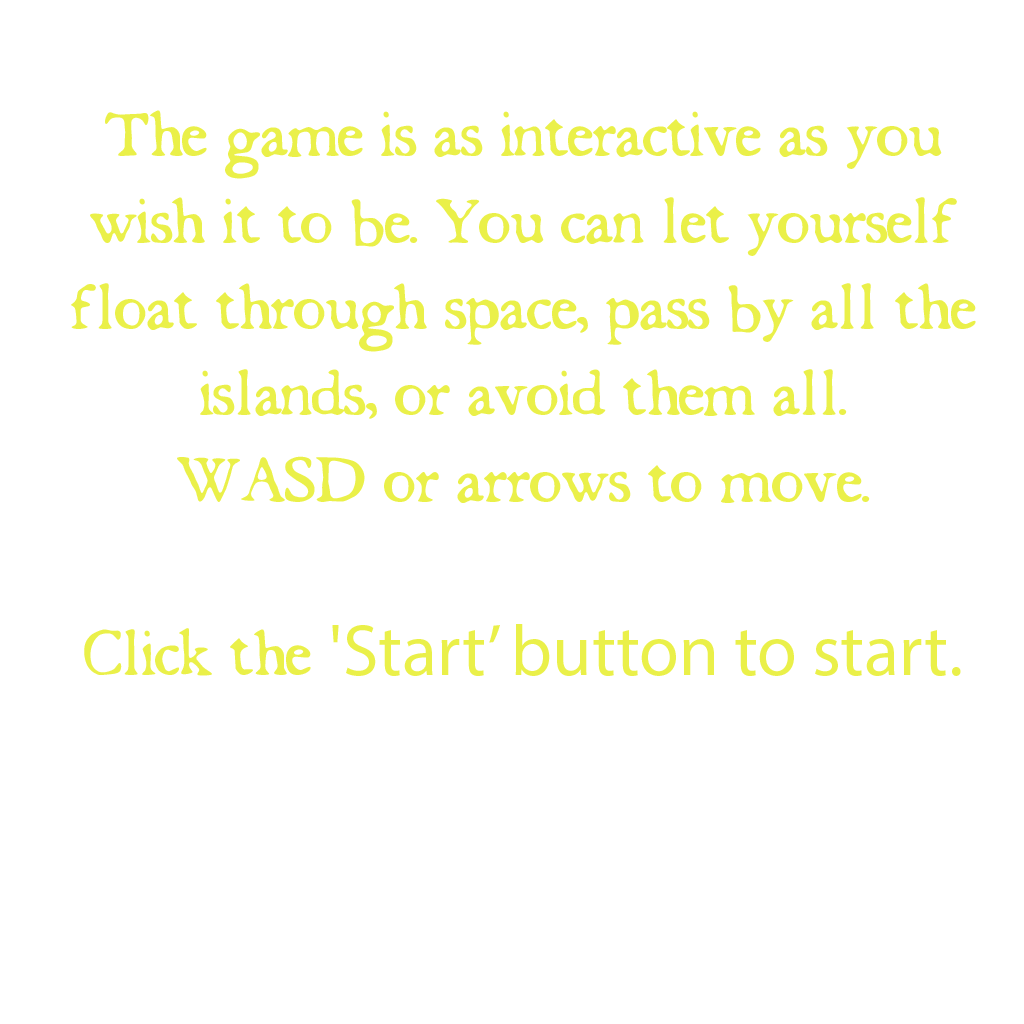
<style>
.page{position:relative;width:1024px;height:1024px;background:#ffffff}
.page>*{position:absolute;margin:0}
.t1{font:72px "Schrift";color:#eaf049}
.t2{font:72px "MyriadPro-Regular";color:#eaf049}
</style>
<div class="page">
<p class="t1" style="left:71px;top:110px;width:905px;height:566px;text-align:center">The game is as interactive as you wish it to be. You can let yourself float through space, pass by all the islands, or avoid them all. <br>WASD or arrows to move.<br><br>Click the <span class="t2">'Start’ button to start.</span></p>
</div>
